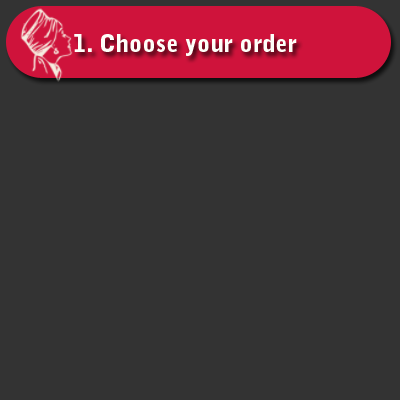
<style>
.page{position:relative;width:400px;height:400px;background:#333333}
.page>*{position:absolute;margin:0}
.t1{font:24px "BellGothicStd-Black";color:#fefff9}
</style>
<div class="page">
<p class="t1" style="left:74px;top:34px;width:223px;height:22px">1. Choose your order</p>
</div>
